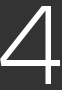
<style>
.page{position:relative;width:62px;height:90px;background:#333333}
.page>*{position:absolute;margin:0}
.t1{font:111.8px "NexaLight";color:#ffffff;scale:0.92 1}
</style>
<div class="page">
<p class="t1" style="left:0px;top:6px;width:61px;height:78px">4</p>
</div>
